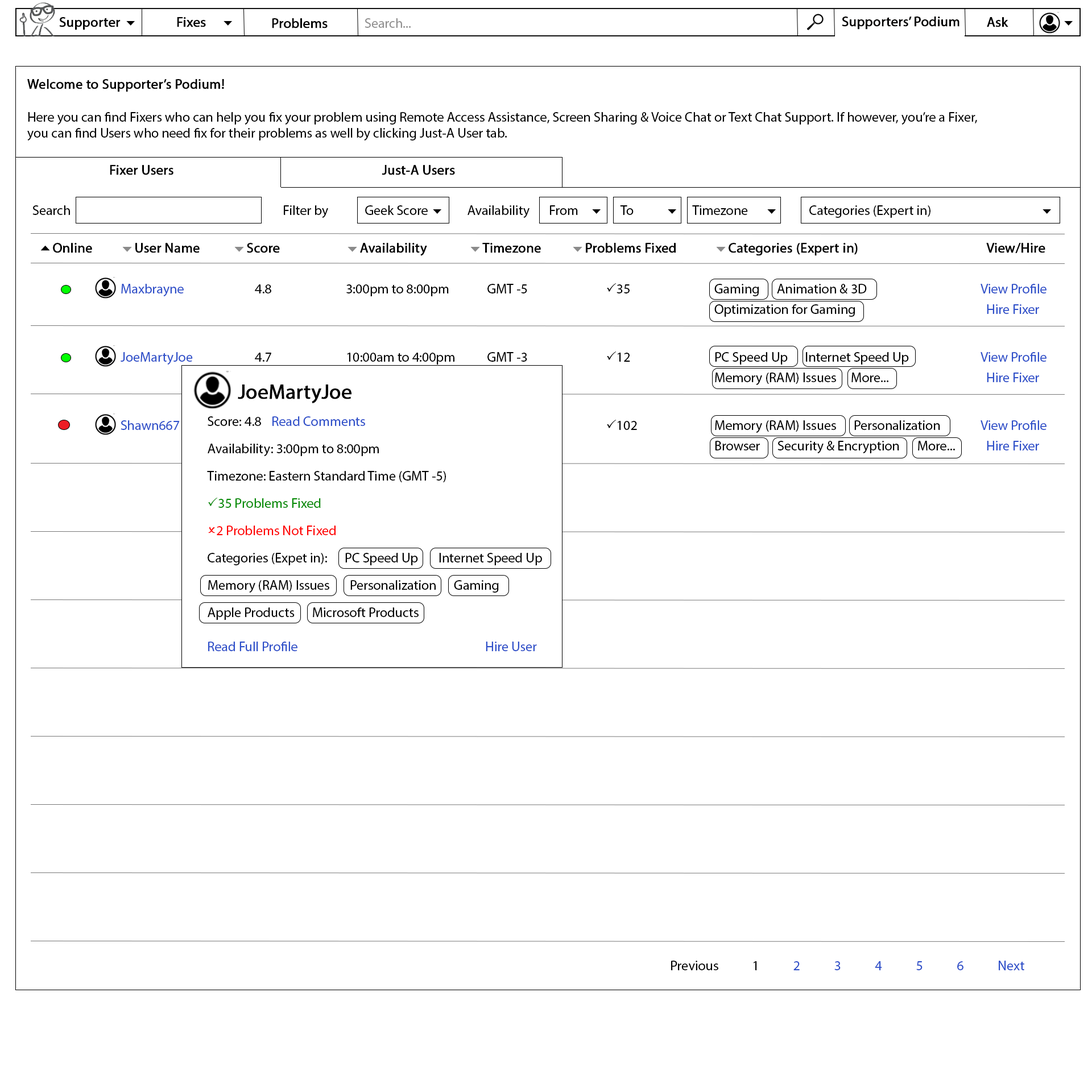
<style>
.page{position:relative;width:1092px;height:1092px;background:#ffffff}
.page>*{position:absolute;margin:0}
.t1{font:13.6px "MyriadPro-Regular";color:#000000;font-weight:bold}
.t2{font:13.6px "MyriadPro-Regular";color:#010000;font-weight:bold}
.t3{font:13.6px "MyriadPro-Regular";color:#919090}
.t4{font:13.6px "MyriadPro-Regular";color:#000000}
.t5{font:13.6px/20.5px "MyriadPro-Regular";color:#000000;font-weight:bold}
.t6{font:13.6px "Webdings";color:#000000}
.t7{font:13.6px/27.3px "MyriadPro-Regular";color:#000000}
.t8{font:13.6px/20.5px "Webdings";color:#000000;font-weight:bold}
.t9{font:13.6px/20.5px "Webdings";color:#8b8b8b;font-weight:bold}
.t10{font:13.6px/20.5px "MyriadPro-Regular";color:#2d4fc9}
.t11{font:13.6px/20.5px "MyriadPro-Regular";color:#000000}
.t12{font:13.6px/20.5px "Wingdings2";color:#000000}
.t13{font:13.6px/27.3px "MyriadPro-Regular";color:#2d4fc9}
.t14{font:13.6px/27.3px "Wingdings2";color:#000000}
.t15{font:20.5px/27.3px "MyriadPro-Regular";color:#000000;font-weight:bold}
.t16{font:13.6px/20.5px "Wingdings2";color:#028b02}
.t17{font:13.6px/20.5px "MyriadPro-Regular";color:#028b02}
.t18{font:13.6px/27.3px "MyriadPro-Regular";color:#028b02}
.t19{font:13.6px/27.3px "Wingdings2";color:#ff0000}
.t20{font:13.6px/27.3px "MyriadPro-Regular";color:#ff0000}
.t21{font:13.6px/34.1px "MyriadPro-Regular";color:#2d4fc9}
.t22{font:13.6px "MyriadPro-Regular";color:#2d4fc9}
</style>
<div class="page">
<p class="t1" style="left:59px;top:17px;width:62px;height:13px">Supporter</p>
<p class="t1" style="left:177px;top:17px;width:29px;height:10px">Fixes</p>
<p class="t2" style="left:842px;top:16px;width:117px;height:14px">Supporters’ Podium</p>
<p class="t1" style="left:987px;top:17px;width:21px;height:10px">Ask</p>
<p class="t1" style="left:272px;top:18px;width:56px;height:10px">Problems</p>
<p class="t3" style="left:365px;top:18px;width:46px;height:10px">Search...</p>
<p class="t4" style="left:27px;top:79px;width:950px;height:96px"><span class="t1">Welcome to Supporter’s Podium!<br><br></span>Here you can find Fixers who can help you fix your problem using Remote Access Assistance, Screen Sharing &amp; Voice Chat or Text Chat Support. If however, you’re a Fixer, <br>you can find Users who need fix for their problems as well by clicking Just-A User tab.<br><br>    <span class="t5">Fixer Users            Just-A Users</span></p>
<p class="t4" style="left:32px;top:205px;width:38px;height:10px">Search</p>
<p class="t4" style="left:284px;top:205px;width:768px;height:13px">Filter by       Geek Score <span class="t6">6</span>  Availability   From    <span class="t6">6</span>      To      <span class="t6">6</span> Timezone      <span class="t6">6</span>      Categories (Expert in)      <span class="t6">6</span></p>
<p class="t7" style="left:40px;top:243px;width:1006px;height:210px"><span class="t8">5</span><span class="t5">Online  </span><span class="t9">6</span><span class="t5">User Name     </span><span class="t9">6</span><span class="t5">Score     </span><span class="t9">6</span><span class="t5">Availability   </span><span class="t9">6</span><span class="t5">Timezone  </span><span class="t9">6</span><span class="t5">Problems Fixed  </span><span class="t9">6</span><span class="t5">Categories (Expert in)        View/Hire<br><br>    </span><span class="t10">Maxbrayne</span><span class="t11">       4.8    3:00pm to 8:00pm             GMT -5         </span><span class="t12">P</span><span class="t11">35     Gaming      Animation &amp; 3D      </span><span class="t10">View Profile<br></span><span class="t11">                                 Optimization for Gaming         </span><span class="t10">Hire Fixer<br><br>    </span><span class="t13">JoeMartyJoe</span>       4.7    10:00am to 4:00pm           GMT -3         <span class="t14">P</span>12     PC Speed Up      Internet Speed Up    <span class="t13">View Profile<br></span><span class="t11">                                 Memory (RAM) Issues     More...       </span><span class="t10">Hire Fixer<br><br>    Shawn667 </span><span class="t11">       4.7    5:00pm to 10:00pm  GMT 0         </span><span class="t14">P</span>102    Memory (RAM) Issues      Personalization  <span class="t13">View Profile<br></span><span class="t11">                                 Browser      Security &amp; Encryption      More...    </span><span class="t10">Hire Fixer</span></p>
<p class="t7" style="left:207px;top:384px;width:335px;height:267px"><span class="t15">   JoeMartyJoe<br></span>Score: 4.8  <span class="t13">Read Comments<br></span>Availability: 3:00pm to 8:00pm<br>Timezone: Eastern Standard Time (GMT -5)<br><span class="t16">P</span><span class="t17">35 </span><span class="t18">Problems Fixed<br></span><span class="t19">O</span><span class="t20">2 Problems Not Fixed<br></span>Categories (Expet in):      PC Speed Up       Internet Speed Up<br>Memory (RAM) Issues       Personalization      Gaming<br>Apple Products      Microsoft Products<br><span class="t21">Read Full Profile             Hire User</span></p>
<p class="t22" style="left:671px;top:961px;width:353px;height:9px"><span class="t4">Previous  1</span>  2  3  4  5  6  Next</p>
</div>
